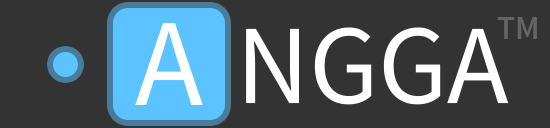
<style>
.page{position:relative;width:550px;height:128px;background:#333333}
.page>*{position:absolute;margin:0}
.t1{font:33.3px "SourceSansPro-Semibold";color:#646464;text-transform:uppercase}
.t2{font:125px "SourceSansPro-Regular";letter-spacing:-0.14em;color:#fffefe}
.t3{font:112.5px "SourceSansPro-Regular";color:#ffffff;text-transform:uppercase}
</style>
<div class="page">
<p class="t1" style="left:497px;top:17px;width:40px;height:22px">TM</p>
<p class="t2" style="left:135px;top:23px;width:68px;height:82px">A</p>
<p class="t3" style="left:246px;top:27px;width:263px;height:78px">ngga</p>
</div>
